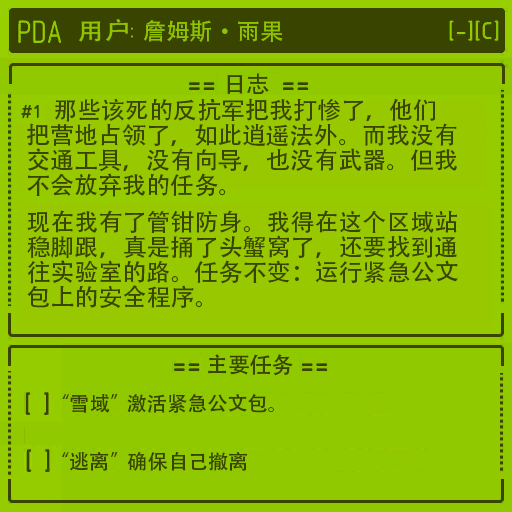
<style>
.page{position:relative;width:512px;height:512px;background:#98c800}
.page>*{position:absolute;margin:0}
.t1{font:24px/25px "AdobeHeitiStd-Regular";color:#384400}
</style>
<div class="page">
<p class="t1" style="left:27px;top:98px;width:430px;height:99px">那些该死的反抗军把我打惨了，他们<br>把营地占领了，如此逍遥法外。而我没有<br>交通工具，没有向导，也没有武器。但我<br>不会放弃我的任务。</p>
<p class="t1" style="left:27px;top:210px;width:431px;height:98px">现在我有了管钳防身。我得在这个区域站<br>稳脚跟，真是捅了头蟹窝了，还要找到通<br>往实验室的路。任务不变：运行紧急公文<br>包上的安全程序。</p>
</div>
